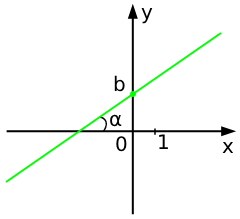
<style>
.page{position:relative;width:240px;height:219px;background:#ffffff}
.page>*{position:absolute;margin:0}
.t1{font:20px "DejaVuSans";color:#000000}
</style>
<div class="page">
<p class="t1" style="left:141px;top:8px;width:12px;height:16px">y</p>
<p class="t1" style="left:114px;top:75px;width:11px;height:17px">b</p>
<p class="t1" style="left:110px;top:114px;width:12px;height:13px">α</p>
<p class="t1" style="left:116px;top:136px;width:11px;height:16px">0</p>
<p class="t1" style="left:159px;top:134px;width:9px;height:15px">1</p>
<p class="t1" style="left:222px;top:142px;width:12px;height:11px">x</p>
</div>
